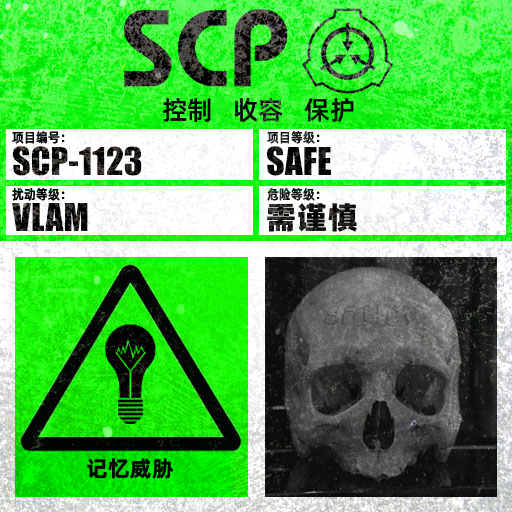
<style>
.page{position:relative;width:512px;height:512px}
.page>*{position:absolute;margin:0}
.t1{font:26px "AlibabaPuHuiTiM";color:#000000}
.t2{font:13.3px "AlibabaPuHuiTiM";letter-spacing:0.02em;color:#000000;scale:0.9 1}
.t3{font:13.3px "AlibabaPuHuiTiM";letter-spacing:0.02em;scale:0.9 1}
.t4{font:30.3px "AlibabaPuHuiTiH";letter-spacing:0.02em}
.t5{font:22px "AlibabaPuHuiTiB";letter-spacing:0.02em;color:#000000}
</style>
<div class="page">
<p class="t1" style="left:163px;top:97px;width:191px;height:26px">控制   收容   保护</p>
<p class="t2" style="left:12px;top:131px;width:53px;height:13px">项目编号：</p>
<p class="t3" style="left:267px;top:131px;width:53px;height:13px">项目等级：</p>
<p class="t2" style="left:12px;top:188px;width:53px;height:13px">扰动等级：</p>
<p class="t3" style="left:267px;top:188px;width:53px;height:13px">危险等级：</p>
<p class="t4" style="left:267px;top:203px;width:90px;height:29px">需谨慎</p>
<p class="t5" style="left:87px;top:458px;width:87px;height:21px">记忆威胁</p>
</div>
